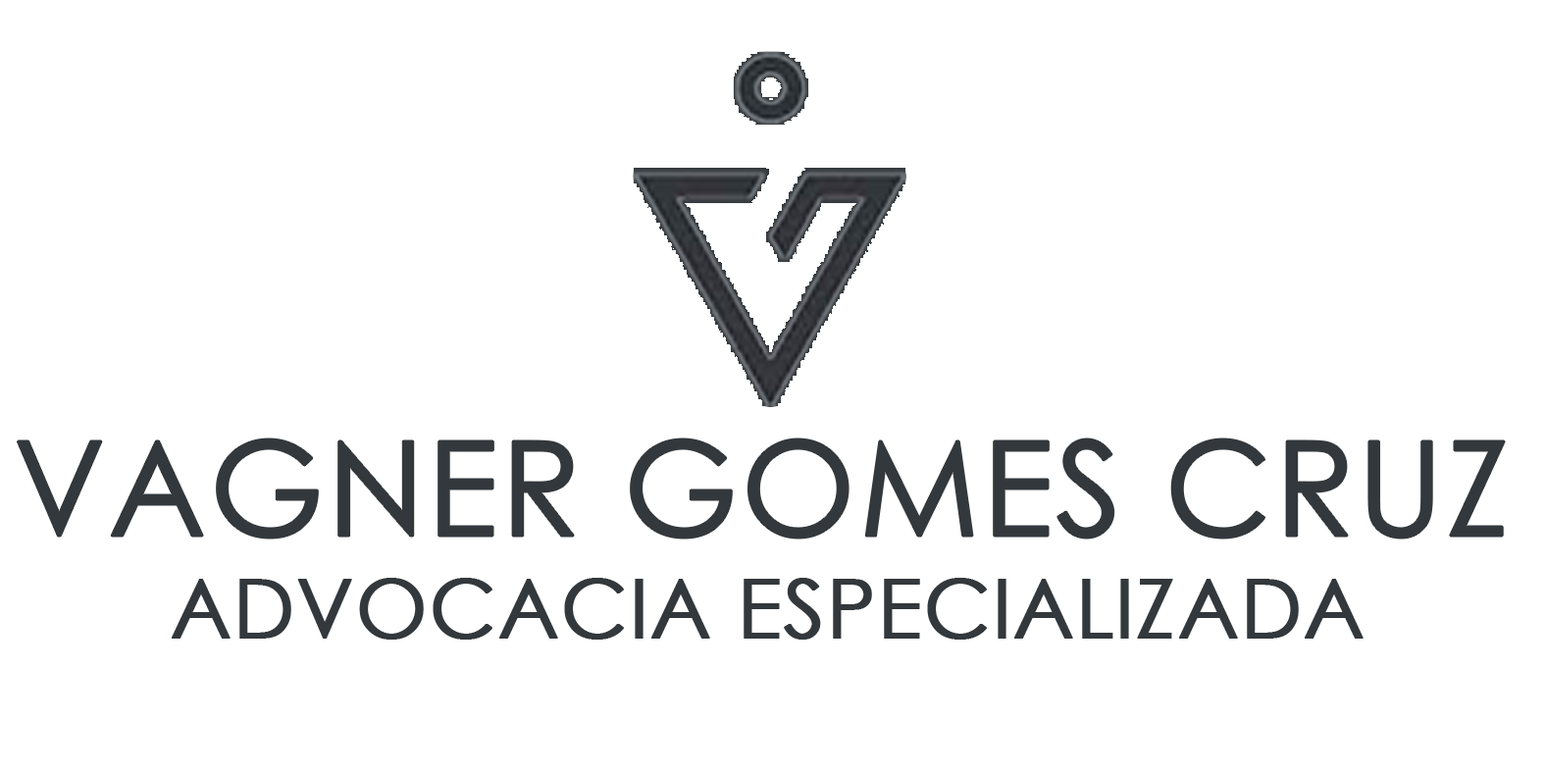
<style>
.page{position:relative;width:1545px;height:772px;background:#ffffff}
.page>*{position:absolute;margin:0}
.t1{font:130.9px "CenturyGothic";color:#33383c;text-transform:uppercase;font-weight:bold}
.t2{font:81.8px "CenturyGothic";color:#33383c;text-transform:uppercase;font-weight:bold}
</style>
<div class="page">
<p class="t1" style="left:17px;top:438px;width:1488px;height:100px">vagner gomes cruz</p>
<p class="t2" style="left:172px;top:578px;width:1191px;height:61px">advocacia especializada</p>
</div>
